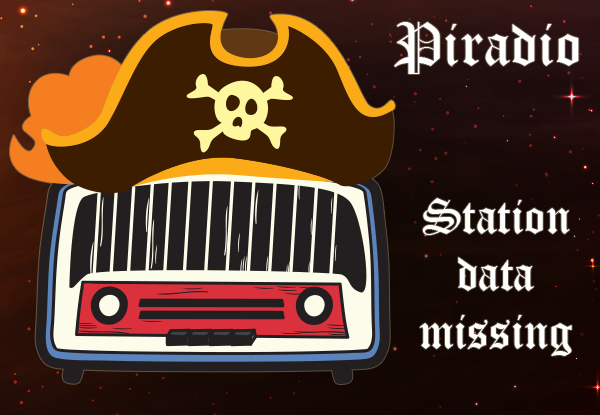
<style>
.page{position:relative;width:600px;height:415px}
.page>*{position:absolute;margin:0}
.t1{font:60px "OldEnglishTextMT";color:#ffffff}
.t2{font:48px "OldEnglishTextMT";color:#ffffff}
</style>
<div class="page">
<p class="t1" style="left:394px;top:22px;width:185px;height:52px">Piradio</p>
<p class="t2" style="left:419px;top:198px;width:153px;height:158px;text-align:center">Station<br>data<br>missing</p>
</div>
